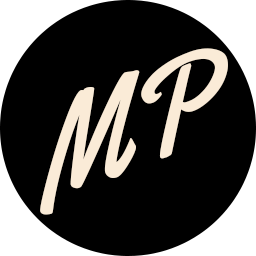
<style>
.page{position:relative;width:256px;height:256px;background:#000000}
.page>*{position:absolute;margin:0}
.t1{font:129.2px "Yellowtail-Regular";color:#faebd7}
</style>
<div class="page">
<p class="t1" style="left:40px;top:48px;width:188px;height:167px;rotate:-20deg">MP</p>
</div>
